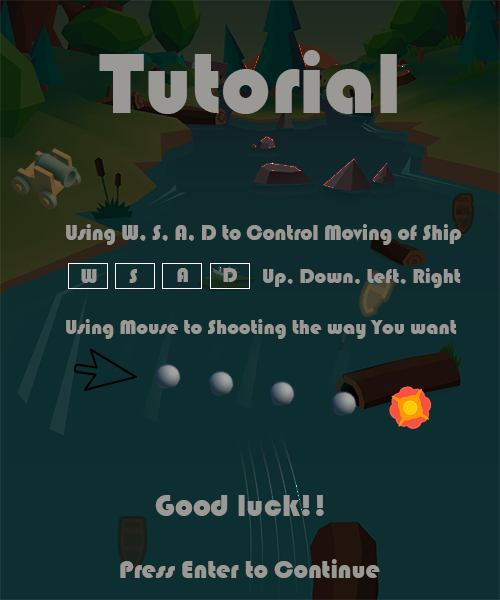
<style>
.page{position:relative;width:500px;height:600px}
.page>*{position:absolute;margin:0}
.t1{font:88.2px "Bauhaus93";color:#9a9995}
.t2{font:21.5px "Bauhaus93";color:#9a9995}
.t3{font:20.8px "Bauhaus93";color:#9a9995}
.t4{font:32.1px "Bauhaus93";color:#9a9995}
.t5{font:25.7px "Bauhaus93";color:#9a9995}
</style>
<div class="page">
<p class="t1" style="left:99px;top:50px;width:298px;height:64px">Tutorial</p>
<p class="t2" style="left:66px;top:224px;width:396px;height:21px">Using W, S, A, D to Control Moving of Ship</p>
<p class="t3" style="left:81px;top:269px;width:16px;height:14px">W</p>
<p class="t3" style="left:129px;top:269px;width:8px;height:14px">S</p>
<p class="t3" style="left:177px;top:268px;width:11px;height:14px">A</p>
<p class="t3" style="left:223px;top:268px;width:15px;height:14px">D</p>
<p class="t3" style="left:263px;top:268px;width:198px;height:20px">Up, Down, Left, Right</p>
<p class="t3" style="left:66px;top:319px;width:391px;height:20px">Using Mouse to Shooting the way You want</p>
<p class="t4" style="left:155px;top:495px;width:169px;height:21px">Good luck!!</p>
<p class="t5" style="left:120px;top:559px;width:260px;height:19px">Press Enter to Continue</p>
</div>
